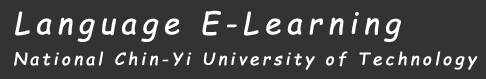
<style>
.page{position:relative;width:486px;height:79px;background:#333333}
.page>*{position:absolute;margin:0}
.t1{font:29.2px "ComicSansMS-Italic";letter-spacing:0.18em;color:#ffffff;font-weight:bold}
.t2{font:16.7px "ComicSansMS-Italic";letter-spacing:0.18em;color:#ffffff;font-weight:bold}
</style>
<div class="page">
<p class="t1" style="left:15px;top:10px;width:386px;height:32px">Language E-Learning</p>
<p class="t2" style="left:14px;top:51px;width:464px;height:19px">National Chin-Yi University of Technology</p>
</div>
